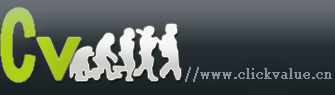
<style>
.page{position:relative;width:335px;height:95px}
.page>*{position:absolute;margin:0}
.t1{font:108px "FranklinGothic-DemiCond";color:#aed017;scale:0.67 1}
.t2{font:13px "Georgia";color:#889093;font-weight:bold}
</style>
<div class="page">
<p class="t1" style="left:1px;top:8px;width:34px;height:74px">C</p>
<p class="t2" style="left:185px;top:67px;width:147px;height:15px">//www.clickvalue.cn</p>
</div>
